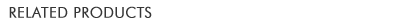
<style>
.page{position:relative;width:400px;height:24px;background:#ffffff}
.page>*{position:absolute;margin:0}
.t1{font:14.7px "FuturaBT-Light";letter-spacing:0.025em;color:#363636;text-transform:uppercase;font-weight:bold}
</style>
<div class="page">
<p class="t1" style="left:9px;top:6px;width:143px;height:12px">RELATED PRODUCTS</p>
</div>
